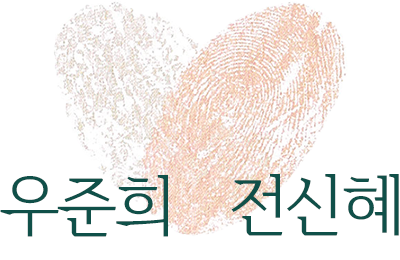
<style>
.page{position:relative;width:400px;height:260px;background:#ffffff}
.page>*{position:absolute;margin:0}
.t1{font:66.7px "Daehan";letter-spacing:-0.05em;color:#105049}
</style>
<div class="page">
<p class="t1" style="left:231px;top:174px;width:168px;height:62px">전신혜</p>
<p class="t1" style="left:0px;top:175px;width:168px;height:62px">우준희</p>
</div>
